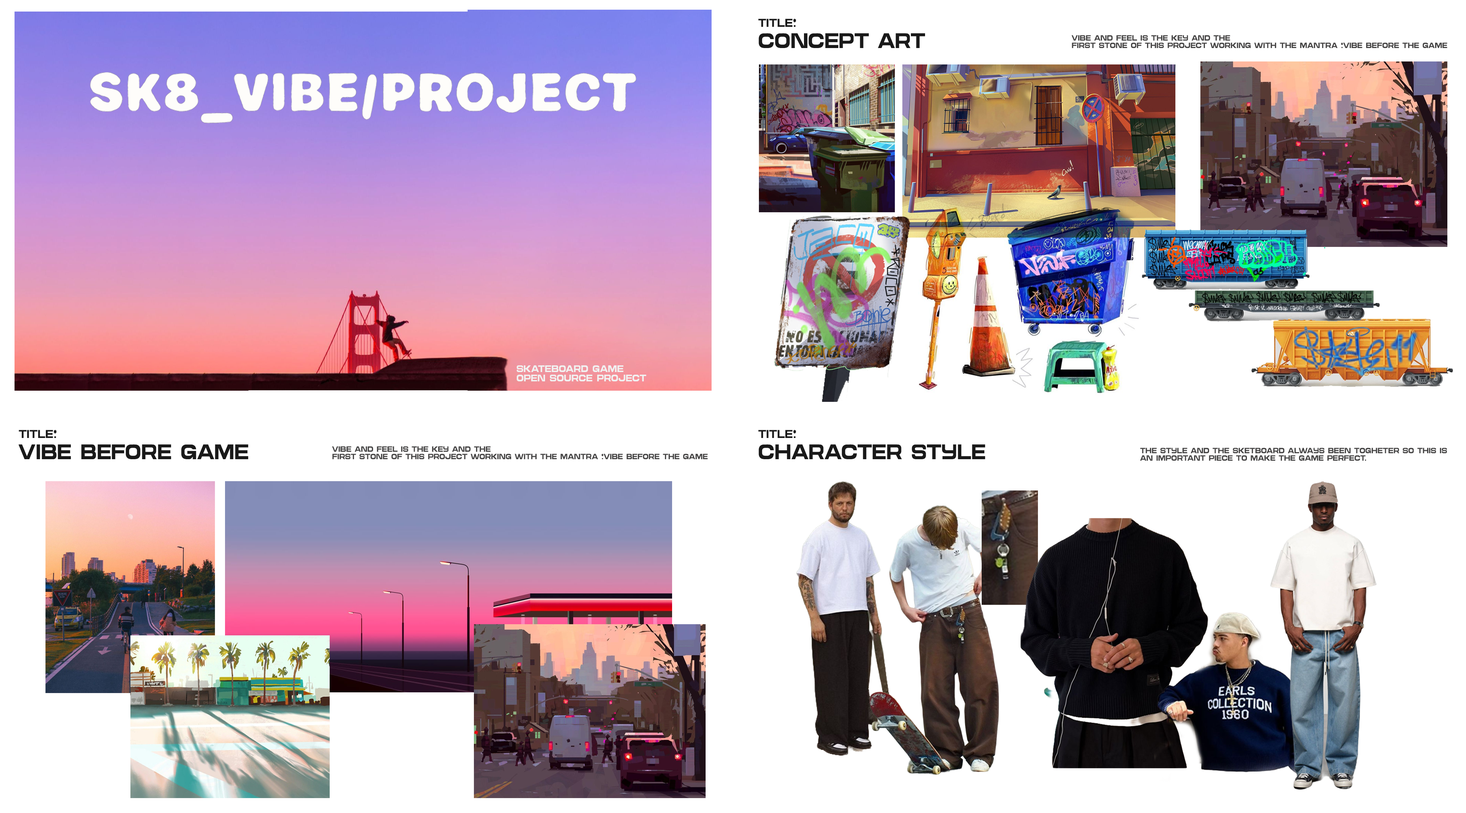
<style>
.page{position:relative;width:1466px;height:813px;background:#ffffff}
.page>*{position:absolute;margin:0}
.t1{font:10.8px "MediumRegular";letter-spacing:0.02em;color:#191919;text-transform:uppercase;scale:0.77 1}
.t2{font:19.8px "MediumRegular";letter-spacing:0.02em;color:#191919;text-transform:uppercase;scale:0.77 1}
.t3{font:7.2px "MediumRegular";letter-spacing:0.02em;color:#454444;text-transform:uppercase;scale:0.77 1}
.t4{font:9px "MediumRegular";letter-spacing:0.02em;color:#f1f1f1;text-transform:uppercase;scale:0.77 1}
</style>
<div class="page">
<p class="t1" style="left:758px;top:19px;width:38px;height:8px">title:</p>
<p class="t2" style="left:759px;top:33px;width:166px;height:15px">CONCEPT ART</p>
<p class="t3" style="left:1072px;top:35px;width:375px;height:13px">Vibe and feel is the key and the<br>first stone of this project working with the mantra “vibe before the game</p>
<p class="t4" style="left:517px;top:365px;width:129px;height:17px">skateboard game <br>open source project</p>
<p class="t1" style="left:19px;top:430px;width:38px;height:8px">title:</p>
<p class="t1" style="left:758px;top:430px;width:38px;height:8px">title:</p>
<p class="t2" style="left:18px;top:444px;width:231px;height:15px">vibe before game</p>
<p class="t3" style="left:332px;top:446px;width:376px;height:13px">Vibe and feel is the key and the<br>first stone of this project working with the mantra “vibe before the game</p>
<p class="t2" style="left:759px;top:444px;width:226px;height:15px">character style</p>
<p class="t3" style="left:1140px;top:448px;width:307px;height:13px">the style and the sketboard always been togheter so this is<br>an important piece to make the game perfect.</p>
</div>
